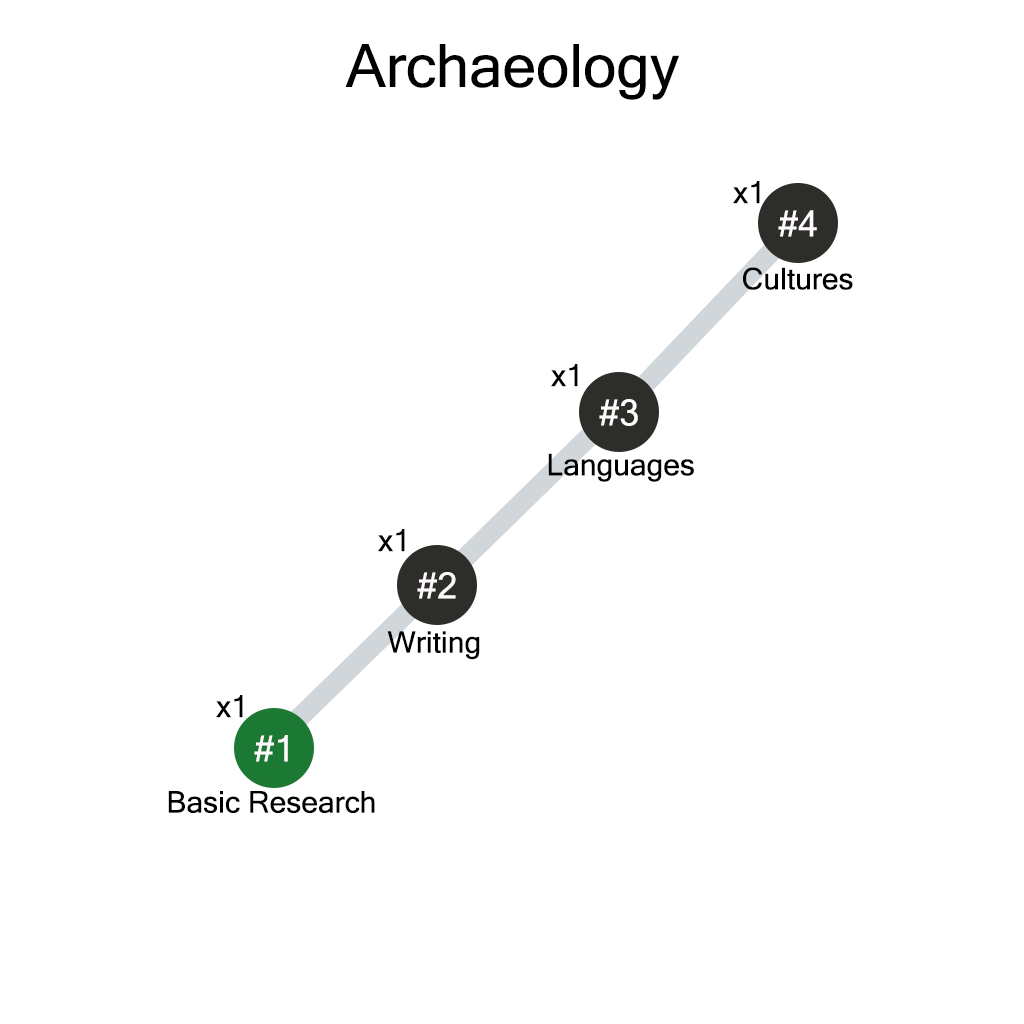
<style>
.page{position:relative;width:1024px;height:1024px;background:#ffffff}
.page>*{position:absolute;margin:0}
.t1{font:60px "MicrosoftSansSerif";color:#000000}
.t2{font:30px "MicrosoftSansSerif";color:#000000}
.t3{font:36px "MicrosoftSansSerif";color:#fefafc}
</style>
<div class="page">
<p class="t1" style="left:345px;top:44px;width:334px;height:56px">Archaeology</p>
<p class="t2" style="left:733px;top:181px;width:27px;height:23px">x1</p>
<p class="t3" style="left:778px;top:210px;width:39px;height:27px">#4</p>
<p class="t2" style="left:743px;top:267px;width:110px;height:23px">Cultures</p>
<p class="t2" style="left:551px;top:364px;width:27px;height:23px">x1</p>
<p class="t3" style="left:599px;top:399px;width:39px;height:27px">#3</p>
<p class="t2" style="left:548px;top:453px;width:146px;height:29px">Languages</p>
<p class="t2" style="left:378px;top:529px;width:27px;height:23px">x1</p>
<p class="t3" style="left:417px;top:572px;width:39px;height:27px">#2</p>
<p class="t2" style="left:387px;top:631px;width:93px;height:29px">Writing</p>
<p class="t2" style="left:216px;top:695px;width:27px;height:23px">x1</p>
<p class="t3" style="left:254px;top:735px;width:34px;height:27px">#1</p>
<p class="t2" style="left:168px;top:791px;width:207px;height:22px">Basic Research</p>
</div>
